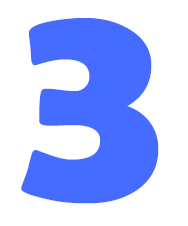
<style>
.page{position:relative;width:188px;height:226px;background:#ffffff}
.page>*{position:absolute;margin:0}
.t1{font:300px "BerlinSansFBDemi-Bold";color:#456cff}
</style>
<div class="page">
<p class="t1" style="left:21px;top:18px;width:138px;height:186px">3</p>
</div>
